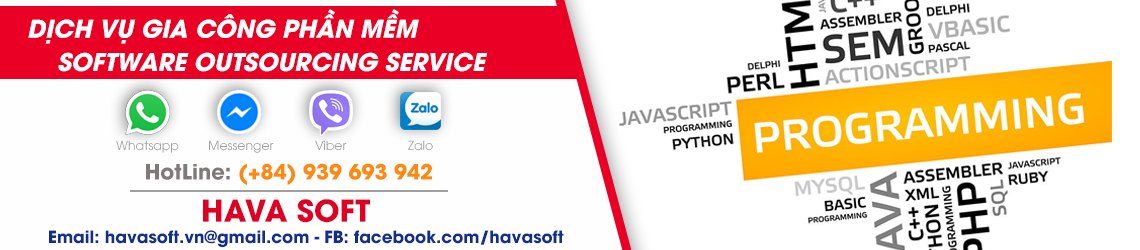
<style>
.page{position:relative;width:1140px;height:250px;background:#fefefe}
.page>*{position:absolute;margin:0}
.t1{font:24.2px/33.3px "UTMAvo-BoldItalic";color:#ffffff}
.t2{font:12.5px "UTM-Avo";color:#9f9f9f}
.t3{font:21.1px "UTMAvoBold";color:#fe890b}
.t4{font:21.1px "UTMAvoBold";color:#7f7979}
.t5{font:30px "UTMAvoBold";color:#df0024}
.t6{font:16.7px "UTMAvoBold";color:#112f91}
</style>
<div class="page">
<p class="t1" style="left:28px;top:9px;width:460px;height:63px">DỊCH VỤ GIA CÔNG PHẦN MỀM<br>    SOFTWARE OUTSOURCING SERVICE</p>
<p class="t2" style="left:116px;top:140px;width:63px;height:13px">Whatsapp</p>
<p class="t2" style="left:209px;top:140px;width:65px;height:13px">Messenger</p>
<p class="t2" style="left:315px;top:140px;width:32px;height:11px">Viber</p>
<p class="t2" style="left:408px;top:140px;width:25px;height:11px">Zalo</p>
<p class="t3" style="left:146px;top:163px;width:286px;height:22px"><span class="t4">HotLine: </span>(+84) 939 693 942</p>
<p class="t5" style="left:203px;top:199px;width:167px;height:24px">HAVA SOFT</p>
<p class="t6" style="left:49px;top:230px;width:515px;height:18px">Email: havasoft.vn@gmail.com - FB: facebook.com/havasoft</p>
</div>
